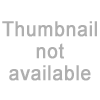
<style>
.page{position:relative;width:100px;height:100px;background:#ffffff}
.page>*{position:absolute;margin:0}
.t1{font:20.4px/22px "ArialMT";letter-spacing:0.02em;color:#afafaf;font-weight:bold;scale:0.93 1}
</style>
<div class="page">
<p class="t1" style="left:2px;top:21px;width:95px;height:60px;text-align:center">Thumbnail<br>not<br>available</p>
</div>
